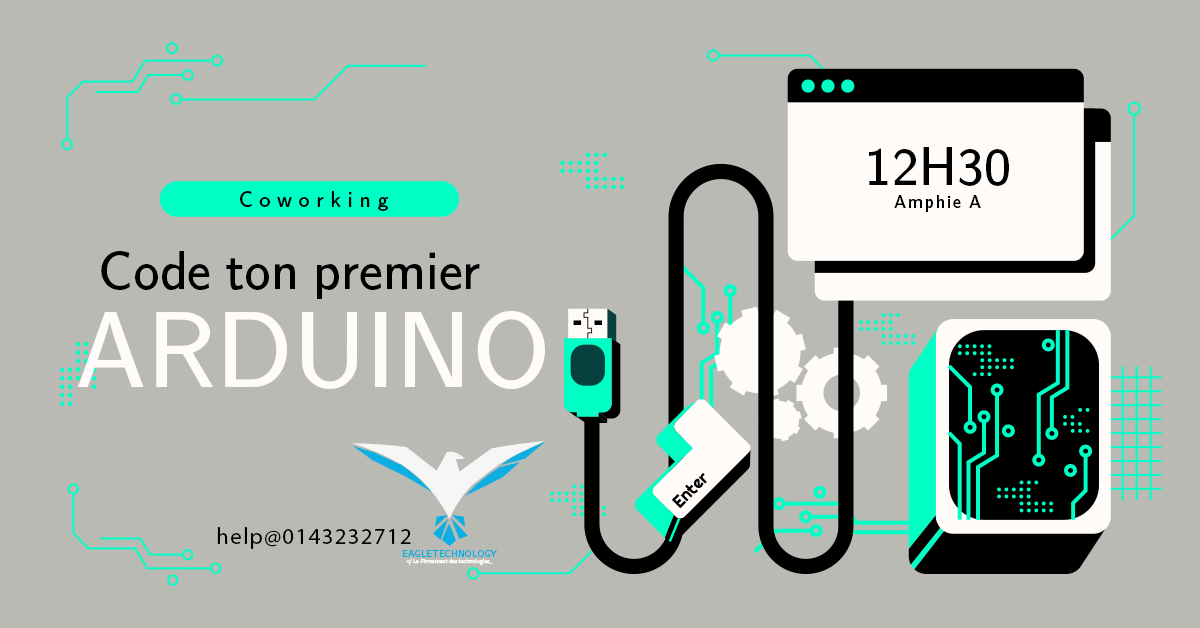
<style>
.page{position:relative;width:1200px;height:628px;background:#babab5}
.page>*{position:absolute;margin:0}
.t1{font:53.5px "MathJax_SansSerif-Regular";color:#000000}
.t2{font:22px "MathJax_SansSerif-Regular";letter-spacing:0.3em;color:#000000}
.t3{font:18.3px "MathJax_SansSerif-Regular";letter-spacing:0.1em;color:#000000}
.t4{font:54px "MathJax_SansSerif-Regular";color:#000000}
.t5{font:107px "MathJax_SansSerif-Regular";color:#fffbf8}
.t6{font:17px "Righteous-Regular";color:#000000}
.t7{font:22.8px "MyriadPro-Regular";letter-spacing:0.06em;color:#000000}
.t8{font:9.8px "MathJax_SansSerif-Regular";color:#0dafe3}
.t9{font:5.7px "MathJax_SansSerif-Regular";color:#fcfcfc;font-weight:bold}
.t10{font:5.7px "MyriadPro-Regular";color:#fcfcfc;font-weight:bold}
</style>
<div class="page">
<p class="t1" style="left:869px;top:147px;width:140px;height:39px">12H30</p>
<p class="t2" style="left:240px;top:191px;width:149px;height:20px">Coworking</p>
<p class="t3" style="left:894px;top:195px;width:87px;height:17px">Amphie A</p>
<p class="t4" style="left:101px;top:251px;width:379px;height:48px">Code ton premier</p>
<p class="t5" style="left:77px;top:311px;width:468px;height:79px">ARDUINO</p>
<p class="t6" style="left:672px;top:473px;width:35px;height:36px;rotate:-45deg">Enter</p>
<p class="t7" style="left:217px;top:527px;width:194px;height:22px">help@0143232712</p>
<p class="t8" style="left:402px;top:550px;width:95px;height:7px">EAGLETECHNOLOGY</p>
<p class="t9" style="left:406px;top:558px;width:87px;height:8px"><span class="t10">&lt;</span>/Le Firmament des technologies_</p>
</div>
